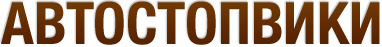
<style>
.page{position:relative;width:382px;height:47px;background:#ffffff}
.page>*{position:absolute;margin:0}
.t1{font:58.4px "HelveticaNeue-CondensedBold";color:#632b02;text-transform:uppercase}
</style>
<div class="page">
<p class="t1" style="left:1px;top:1px;width:379px;height:44px">АвтостопВики</p>
</div>
